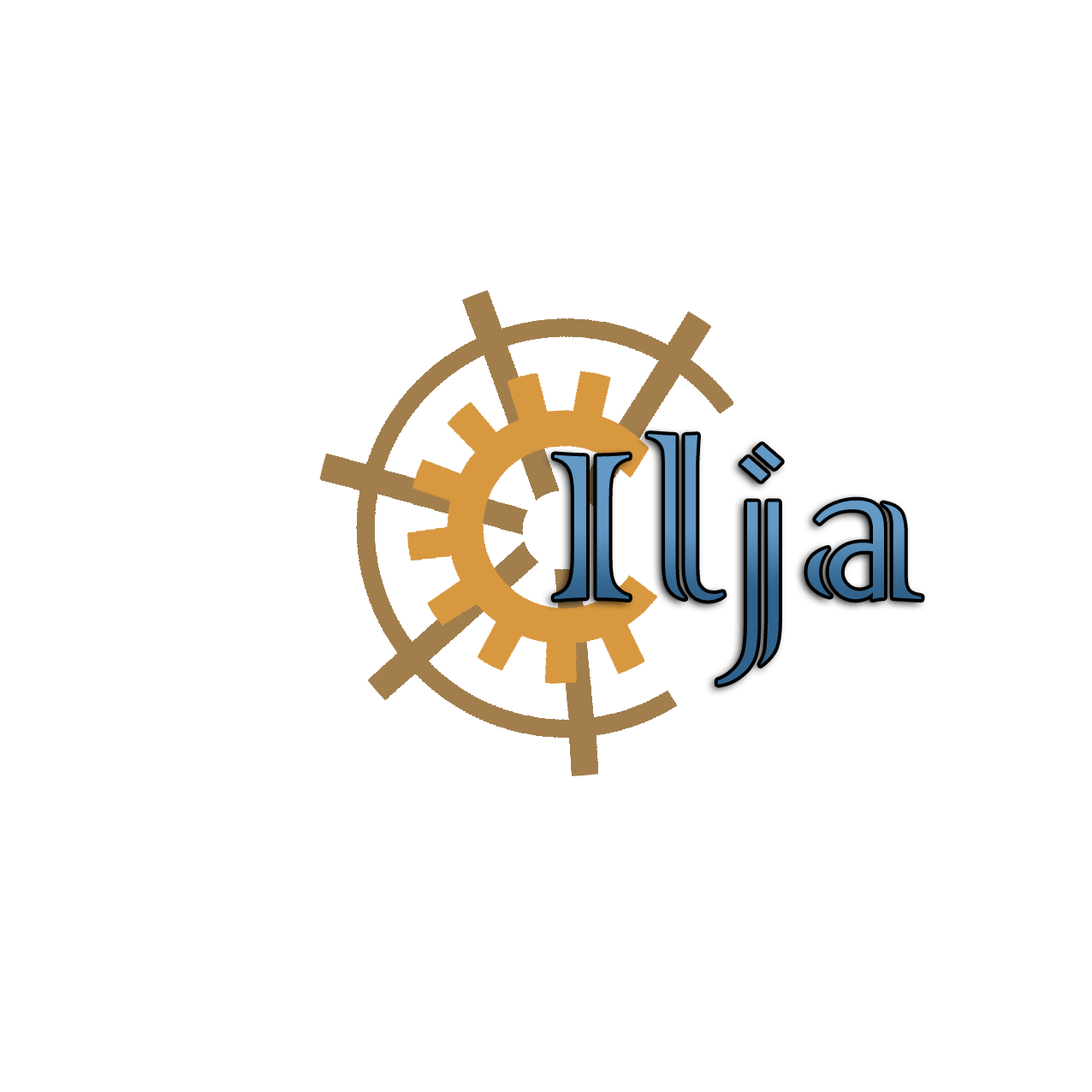
<style>
.page{position:relative;width:1092px;height:1092px;background:#ffffff}
.page>*{position:absolute;margin:0}
.t1{font:273.9px "ColonnaMT";scale:1.08 1}
</style>
<div class="page">
<p class="t1" style="left:554px;top:434px;width:368px;height:251px">Ilja</p>
</div>
